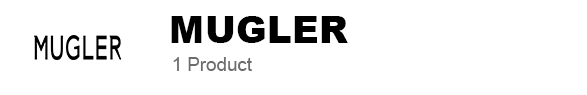
<style>
.page{position:relative;width:587px;height:95px;background:#ffffff}
.page>*{position:absolute;margin:0}
.t1{font:37.5px "Arial-Black";color:#000000}
.t2{font:18.7px "ArialMT";color:#6d6d6d}
</style>
<div class="page">
<p class="t1" style="left:171px;top:16px;width:177px;height:27px">MUGLER</p>
<p class="t2" style="left:173px;top:57px;width:79px;height:14px">1 Product</p>
</div>
